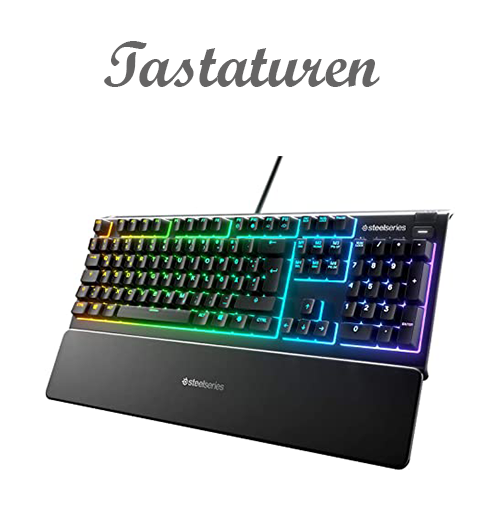
<style>
.page{position:relative;width:499px;height:526px;background:#ffffff}
.page>*{position:absolute;margin:0}
.t1{font:64px "ScriptMTBold";color:#656464}
</style>
<div class="page">
<p class="t1" style="left:104px;top:41px;width:276px;height:46px">Tastaturen</p>
</div>
